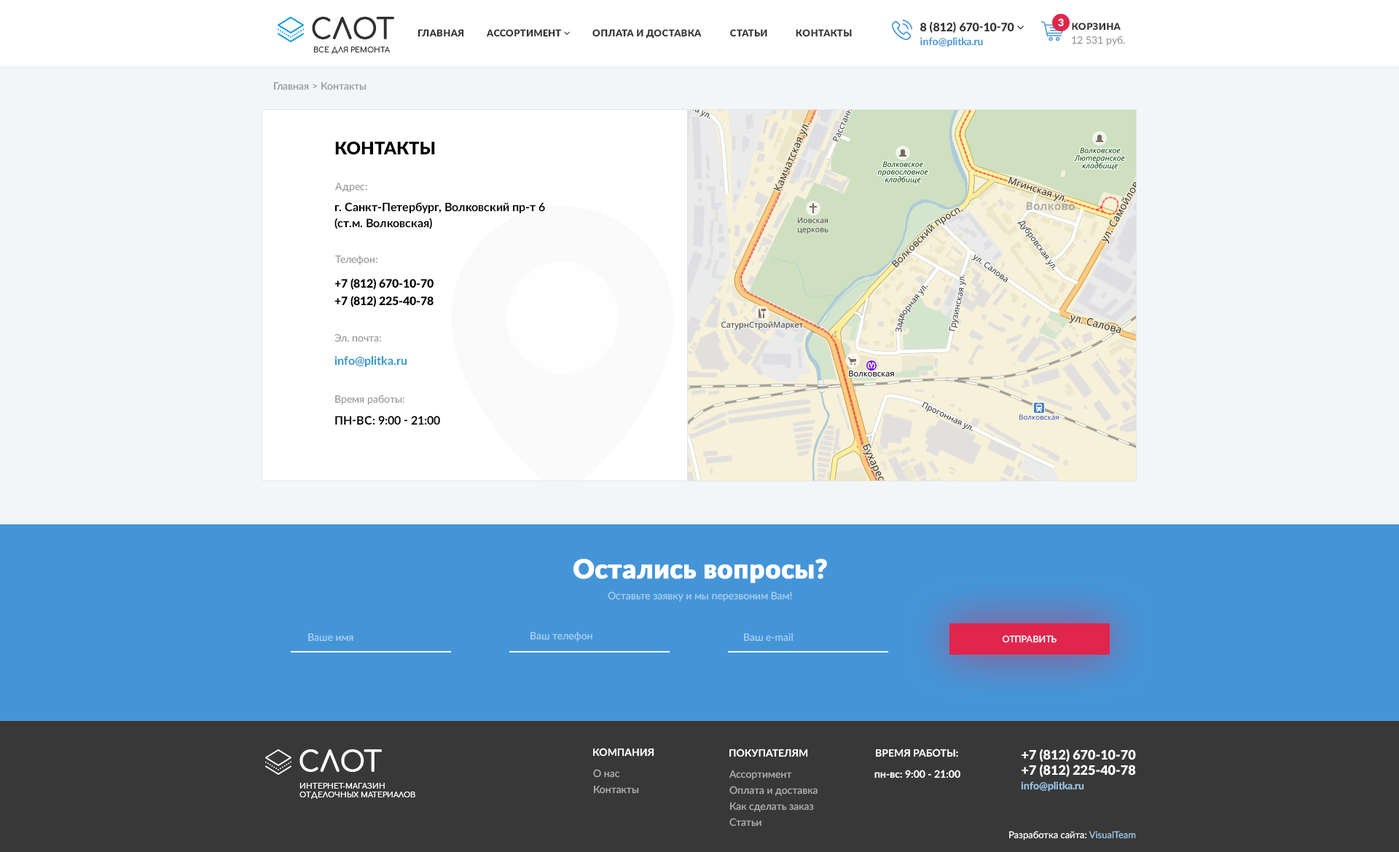
<style>
.page{position:relative;width:1399px;height:852px;background:#f3f6f8}
.page>*{position:absolute;margin:0}
.t1{font:28.3px "Comfortaa-Bold";color:#303030;text-transform:uppercase}
.t2{font:9.5px "Lato-Black";letter-spacing:0.025em;color:#333333;text-transform:uppercase}
.t3{font:10.2px "Lato-Black";color:#ffffff;text-transform:uppercase}
.t4{font:10.2px "Lato-Bold";color:#4495d8}
.t5{font:10.2px "Lato-Regular";color:#999999}
.t6{font:7.3px "Comfortaa-Bold";color:#333333;text-transform:uppercase}
.t7{font:10.2px "Lato-Regular";color:#939393}
.t8{font:17.5px "Lato-Black";color:#000000;text-transform:uppercase}
.t9{font:11.7px/16px "Lato-Bold";color:#000000}
.t10{font:11.7px/17.5px "Lato-Black";color:#000000}
.t11{font:11.7px "Lato-Bold";color:#3399cc}
.t12{font:11.7px "Lato-Bold";color:#000000;text-transform:uppercase}
.t13{font:26.2px "Lato-Black";color:#ffffff;font-weight:bold}
.t14{font:10.2px "Lato-Regular";color:#a7d0f1}
.t15{font:13.1px "Lato-Medium";color:#fefefe;font-variant:small-caps}
.t16{font:28.3px "Comfortaa-Bold";color:#ffffff;text-transform:uppercase}
.t17{font:10.2px "Lato-Bold";color:#ffffff;text-transform:uppercase}
.t18{font:13.1px "Lato-Black";color:#ffffff}
.t19{font:10.2px/16px "Lato-Regular";color:#b1b1b1}
.t20{font:10.2px "Lato-Bold";color:#ffffff}
.t21{font:7.3px "Comfortaa-Bold";color:#ffffff;text-transform:uppercase}
.t22{font:10.2px "Lato-Bold";color:#9ec9eb}
.t23{font:9.5px "Lato-Regular";color:#ffffff}
.t24{font:9.5px "Lato-Regular";color:#9ec9eb}
</style>
<div class="page">
<p class="t1" style="left:312px;top:17px;width:82px;height:22px">СЛот</p>
<p class="t2" style="left:417px;top:29px;width:47px;height:8px">главная</p>
<p class="t2" style="left:592px;top:29px;width:110px;height:10px">оплата и доставка</p>
<p class="t2" style="left:730px;top:29px;width:37px;height:8px">статьи</p>
<p class="t2" style="left:796px;top:29px;width:56px;height:8px">контакты</p>
<p class="t3" style="left:1058px;top:18px;width:6px;height:8px">3</p>
<p class="t2" style="left:1072px;top:23px;width:49px;height:8px">корзина</p>
<p class="t4" style="left:920px;top:37px;width:63px;height:10px">info@plitka.ru</p>
<p class="t5" style="left:1072px;top:36px;width:53px;height:10px">12 531 руб.</p>
<p class="t6" style="left:313px;top:47px;width:77px;height:7px">Все для ремонта</p>
<p class="t7" style="left:274px;top:82px;width:92px;height:8px">Главная &gt; Контакты</p>
<p class="t8" style="left:335px;top:141px;width:100px;height:14px">Контакты</p>
<p class="t5" style="left:335px;top:182px;width:32px;height:10px">Адрес:</p>
<p class="t9" style="left:334px;top:203px;width:211px;height:27px">г. Санкт-Петербург, Волковский пр-т 6<br>(ст.м. Волковская)</p>
<p class="t5" style="left:335px;top:255px;width:42px;height:10px">Телефон:</p>
<p class="t10" style="left:334px;top:278px;width:100px;height:29px">+7 (812) 670-10-70<br>+7 (812) 225-40-78</p>
<p class="t5" style="left:334px;top:334px;width:47px;height:8px">Эл. почта:</p>
<p class="t11" style="left:334px;top:356px;width:73px;height:11px">info@plitka.ru</p>
<p class="t5" style="left:335px;top:395px;width:69px;height:10px">Время работы:</p>
<p class="t12" style="left:335px;top:416px;width:105px;height:9px">пн-вс: 9:00 - 21:00</p>
<p class="t13" style="left:573px;top:559px;width:254px;height:25px">Остались вопросы?</p>
<p class="t14" style="left:608px;top:592px;width:184px;height:10px">Оставьте заявку и мы перезвоним Вам!</p>
<p class="t14" style="left:308px;top:633px;width:45px;height:9px">Ваше имя</p>
<p class="t14" style="left:530px;top:632px;width:62px;height:10px">Ваш телефон</p>
<p class="t14" style="left:744px;top:633px;width:49px;height:9px">Ваш e-mail</p>
<p class="t15" style="left:1002px;top:635px;width:54px;height:8px">отправить</p>
<p class="t16" style="left:299px;top:750px;width:83px;height:22px">СЛот</p>
<p class="t17" style="left:593px;top:748px;width:61px;height:9px">Компания</p>
<p class="t17" style="left:729px;top:749px;width:79px;height:9px">Покупателям</p>
<p class="t17" style="left:876px;top:749px;width:82px;height:9px">Время работы:</p>
<p class="t18" style="left:1021px;top:749px;width:115px;height:28px;text-align:justify">+7 (812) 670-10-70<br>+7 (812) 225-40-78</p>
<p class="t19" style="left:593px;top:769px;width:46px;height:25px;text-align:justify">О нас<br>Контакты</p>
<p class="t19" style="left:729px;top:770px;width:88px;height:57px;text-align:justify">Ассортимент<br>Оплата и доставка<br>Как сделать заказ<br>Статьи</p>
<p class="t20" style="left:874px;top:770px;width:86px;height:9px">пн-вс: 9:00 - 21:00</p>
<p class="t21" style="left:299px;top:783px;width:116px;height:16px">интернет-магазин<br>отделочных материалов</p>
<p class="t22" style="left:1021px;top:782px;width:63px;height:10px">info@plitka.ru</p>
<p class="t23" style="left:1009px;top:831px;width:127px;height:10px">Разработка сайта: <span class="t24">VisualTeam</span></p>
</div>
